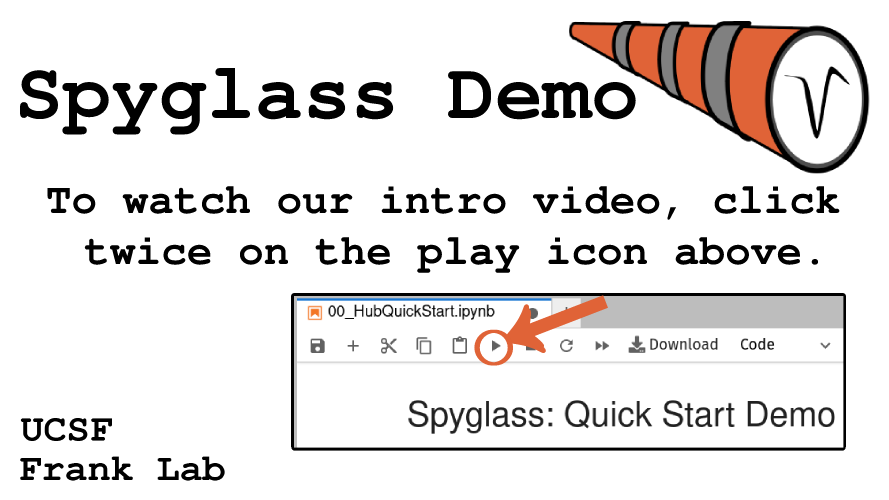
<style>
.page{position:relative;width:889px;height:500px;background:#ffffff}
.page>*{position:absolute;margin:0}
.t1{font:80px "NimbusMono-Bold";color:#000000}
.t2{font:42.7px "NimbusMono-Bold";color:#e06337}
.t3{font:42.7px "NimbusMono-Bold";color:#000000}
.t4{font:193.7px "NimbusMono-Bold";color:#e06337;font-weight:bold}
.t5{font:83.1px "NimbusMono-Bold";color:#e06337;font-weight:bold}
</style>
<div class="page">
<p class="t1" style="left:19px;top:68px;width:617px;height:67px">Spyglass Demo</p>
<p class="t2" style="left:47px;top:186px;width:793px;height:87px;text-align:center">To watch our intro video, click <br>twice on <span class="t3">the </span>play icon above.</p>
<p class="t4" style="left:506px;top:295px;width:102px;height:59px;rotate:69deg">↓</p>
<p class="t5" style="left:474px;top:329px;width:39px;height:37px">○</p>
</div>
